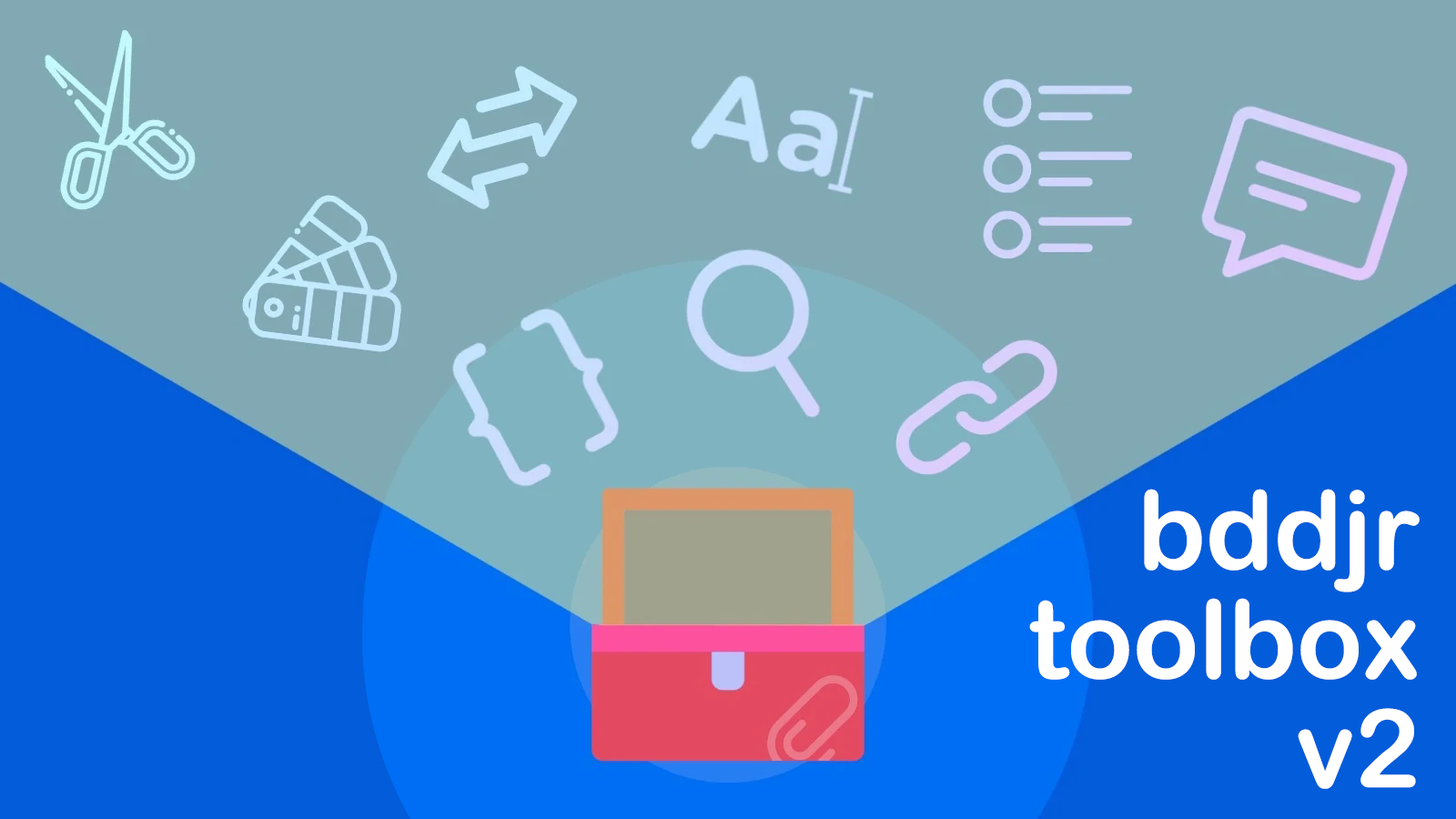
<style>
.page{position:relative;width:1456px;height:819px;background:#82a9b3}
.page>*{position:absolute;margin:0}
.t1{font:109.2px/109.2px "ArialRoundedMTBold";color:#ffffff}
</style>
<div class="page">
<p class="t1" style="left:1029px;top:489px;width:391px;height:300px;text-align:right">bddjr<br>toolbox<br>v2</p>
</div>
